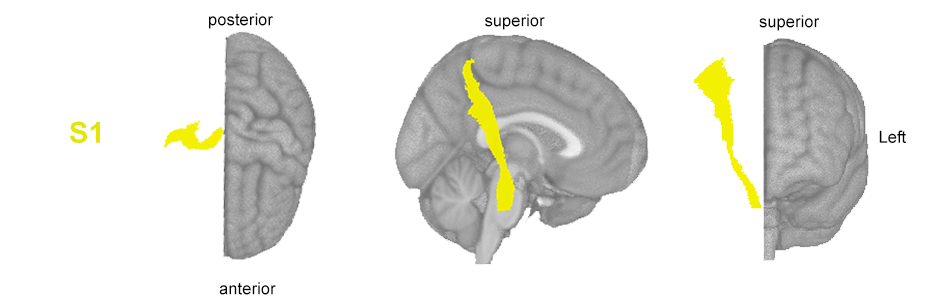
<style>
.page{position:relative;width:952px;height:300px;background:#ffffff}
.page>*{position:absolute;margin:0}
.t1{font:16.7px "ArialMT";color:#000000}
.t2{font:29.2px "Arial-BoldMT";color:#e6e405}
</style>
<div class="page">
<p class="t1" style="left:209px;top:13px;width:64px;height:16px">posterior</p>
<p class="t1" style="left:485px;top:14px;width:60px;height:16px">superior</p>
<p class="t1" style="left:759px;top:15px;width:61px;height:16px">superior</p>
<p class="t2" style="left:70px;top:121px;width:30px;height:22px">S1</p>
<p class="t1" style="left:879px;top:130px;width:27px;height:13px">Left</p>
<p class="t1" style="left:219px;top:282px;width:57px;height:13px">anterior</p>
</div>
